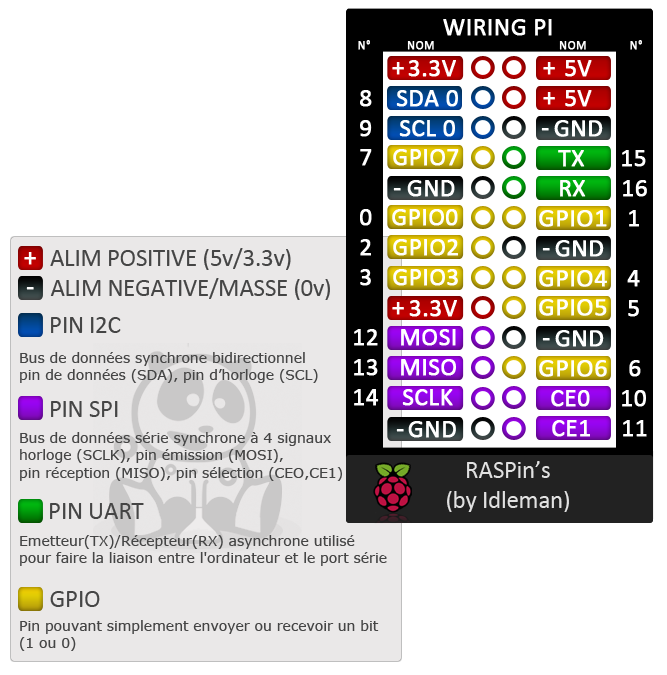
<style>
.page{position:relative;width:667px;height:675px;background:#ffffff}
.page>*{position:absolute;margin:0}
.t1{font:25px "Calibri";color:#ffffff;text-transform:uppercase;font-weight:bold}
.t2{font:12.5px "Calibri";color:#ffffff;text-transform:uppercase;font-weight:bold}
.t3{font:25px "Calibri";letter-spacing:-0.01em;color:#454545}
.t4{font:14.2px "Verdana";letter-spacing:-0.01em;color:#454545}
.t5{font:25px "Calibri";letter-spacing:-0.01em;color:#e1e1e1}
</style>
<div class="page">
<p class="t1" style="left:443px;top:19px;width:109px;height:17px">Wiring PI</p>
<p class="t2" style="left:358px;top:40px;width:12px;height:10px">n°</p>
<p class="t2" style="left:407px;top:41px;width:27px;height:9px">nom</p>
<p class="t2" style="left:559px;top:41px;width:27px;height:9px">nom</p>
<p class="t2" style="left:630px;top:40px;width:12px;height:10px">n°</p>
<p class="t1" style="left:392px;top:62px;width:12px;height:13px">+</p>
<p class="t1" style="left:408px;top:60px;width:48px;height:17px">3.3v</p>
<p class="t1" style="left:543px;top:62px;width:12px;height:13px">+</p>
<p class="t1" style="left:565px;top:60px;width:27px;height:17px">5V</p>
<p class="t1" style="left:360px;top:90px;width:12px;height:17px">8</p>
<p class="t1" style="left:396px;top:90px;width:62px;height:17px">SDA 0</p>
<p class="t1" style="left:543px;top:92px;width:12px;height:13px">+</p>
<p class="t1" style="left:565px;top:90px;width:27px;height:17px">5V</p>
<p class="t1" style="left:360px;top:120px;width:12px;height:17px">9</p>
<p class="t1" style="left:399px;top:120px;width:56px;height:17px">SCL 0</p>
<p class="t1" style="left:554px;top:120px;width:49px;height:17px">GND</p>
<p class="t1" style="left:541px;top:128px;width:8px;height:3px">-</p>
<p class="t1" style="left:360px;top:149px;width:12px;height:17px">7</p>
<p class="t1" style="left:393px;top:149px;width:66px;height:17px">GPIO7</p>
<p class="t1" style="left:558px;top:150px;width:27px;height:17px">TX</p>
<p class="t1" style="left:622px;top:150px;width:24px;height:17px">15</p>
<p class="t1" style="left:407px;top:180px;width:48px;height:17px">GND</p>
<p class="t1" style="left:560px;top:180px;width:26px;height:17px">RX</p>
<p class="t1" style="left:623px;top:180px;width:24px;height:17px">16</p>
<p class="t1" style="left:393px;top:188px;width:8px;height:3px">-</p>
<p class="t1" style="left:360px;top:209px;width:12px;height:17px">0</p>
<p class="t1" style="left:392px;top:209px;width:66px;height:17px">GPIO0</p>
<p class="t1" style="left:539px;top:210px;width:68px;height:17px">GPIO1</p>
<p class="t1" style="left:629px;top:210px;width:10px;height:17px">1</p>
<p class="t1" style="left:360px;top:239px;width:11px;height:17px">2</p>
<p class="t1" style="left:393px;top:239px;width:65px;height:17px">GPIO2</p>
<p class="t1" style="left:555px;top:240px;width:49px;height:17px">GND</p>
<p class="t1" style="left:24px;top:252px;width:12px;height:13px">+</p>
<p class="t3" style="left:50px;top:248px;width:241px;height:22px">ALIM POSITIVE (5v/3.3v)</p>
<p class="t1" style="left:542px;top:248px;width:8px;height:3px">-</p>
<p class="t1" style="left:360px;top:269px;width:11px;height:17px">3</p>
<p class="t1" style="left:393px;top:269px;width:65px;height:17px">GPIO3</p>
<p class="t1" style="left:539px;top:270px;width:68px;height:17px">GPIO4</p>
<p class="t1" style="left:627px;top:270px;width:13px;height:17px">4</p>
<p class="t3" style="left:50px;top:278px;width:280px;height:22px">ALIM NEGATIVE/MASSE (0v)</p>
<p class="t1" style="left:26px;top:287px;width:8px;height:3px">-</p>
<p class="t1" style="left:392px;top:302px;width:12px;height:13px">+</p>
<p class="t1" style="left:409px;top:300px;width:48px;height:17px">3.3v</p>
<p class="t1" style="left:539px;top:299px;width:68px;height:17px">GPIO5</p>
<p class="t1" style="left:628px;top:300px;width:11px;height:17px">5</p>
<p class="t3" style="left:51px;top:317px;width:70px;height:16px">PIN I2C</p>
<p class="t1" style="left:354px;top:329px;width:24px;height:17px">12</p>
<p class="t1" style="left:401px;top:329px;width:55px;height:17px">MOSI</p>
<p class="t1" style="left:542px;top:338px;width:8px;height:3px">-</p>
<p class="t1" style="left:555px;top:330px;width:49px;height:17px">GND</p>
<p class="t4" style="left:20px;top:352px;width:298px;height:31px">Bus de données synchrone bidirectionnel<br>pin de données (SDA), pin d’horloge (SCL)</p>
<p class="t1" style="left:354px;top:359px;width:24px;height:17px">13</p>
<p class="t1" style="left:401px;top:359px;width:55px;height:17px">MISO</p>
<p class="t1" style="left:539px;top:360px;width:68px;height:17px">GPIO6</p>
<p class="t1" style="left:629px;top:360px;width:12px;height:17px">6</p>
<p class="t1" style="left:354px;top:389px;width:25px;height:17px">14</p>
<p class="t1" style="left:402px;top:389px;width:51px;height:17px">SCLK</p>
<p class="t1" style="left:551px;top:390px;width:39px;height:17px">CE0</p>
<p class="t1" style="left:622px;top:390px;width:24px;height:17px">10</p>
<p class="t3" style="left:51px;top:401px;width:67px;height:16px">PIN SPI</p>
<p class="t1" style="left:408px;top:421px;width:48px;height:17px">GND</p>
<p class="t1" style="left:552px;top:420px;width:38px;height:17px">CE1</p>
<p class="t1" style="left:623px;top:420px;width:24px;height:17px">11</p>
<p class="t4" style="left:20px;top:432px;width:322px;height:49px">Bus de données série synchrone à 4 signaux <br>horloge (SCLK), pin émission (MOSI), <br>pin réception (MISO), pin sélection (CEO,CE1)</p>
<p class="t1" style="left:396px;top:429px;width:8px;height:3px">-</p>
<p class="t5" style="left:447px;top:461px;width:122px;height:51px;text-align:center">RASPin’s<br>(by Idleman)</p>
<p class="t3" style="left:50px;top:503px;width:94px;height:16px">PIN UART</p>
<p class="t4" style="left:20px;top:535px;width:367px;height:31px">Emetteur(TX)/Récepteur(RX) asynchrone utilisé <br>pour faire la liaison entre l'ordinateur et le port série</p>
<p class="t3" style="left:50px;top:591px;width:50px;height:16px">GPIO</p>
<p class="t4" style="left:20px;top:620px;width:359px;height:31px">Pin pouvant simplement envoyer ou recevoir un bit<br>(1 ou 0)</p>
</div>
